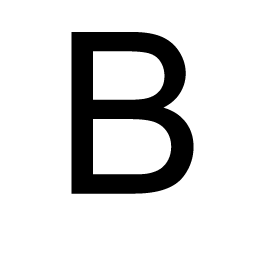
<style>
.page{position:relative;width:256px;height:256px;background:#ffffff}
.page>*{position:absolute;margin:0}
.t1{font:225.5px "ArialMT";color:#000000}
</style>
<div class="page">
<p class="t1" style="left:71px;top:32px;width:123px;height:162px">B</p>
</div>
